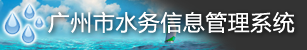
<style>
.page{position:relative;width:307px;height:50px}
.page>*{position:absolute;margin:0}
.t1{font:21.6px "MicrosoftYaHei";letter-spacing:0.04em;color:#ffffff}
</style>
<div class="page">
<p class="t1" style="left:48px;top:11px;width:247px;height:23px">广州市水务信息管理系统</p>
</div>
